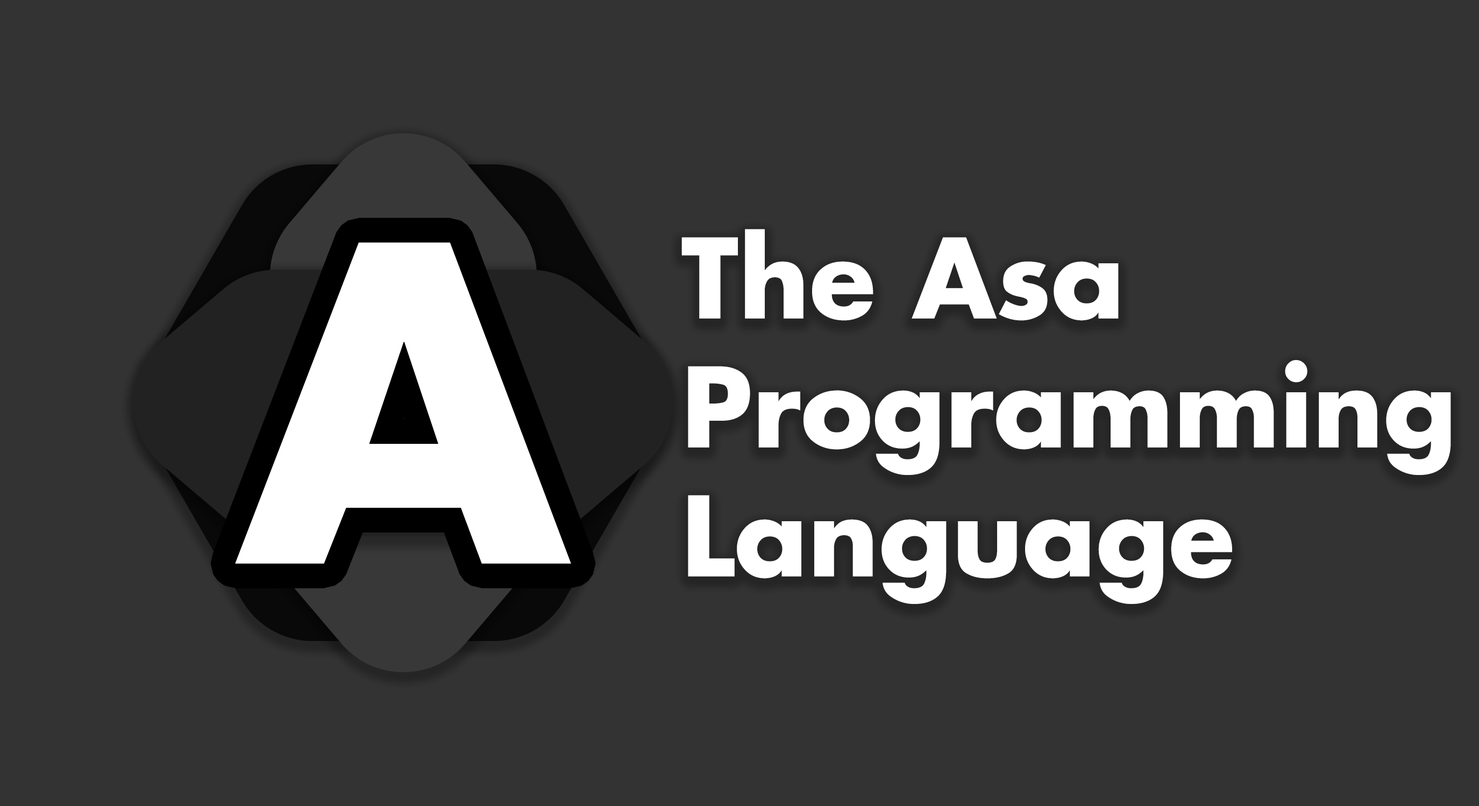
<style>
.page{position:relative;width:1479px;height:806px;background:#333333}
.page>*{position:absolute;margin:0}
.t1{font:107.5px "Futura-Bold";color:#ffffff}
.t2{font:425.6px "Futura-Bold";color:#ffffff}
</style>
<div class="page">
<p class="t1" style="left:681px;top:229px;width:770px;height:375px">The Asa<br>Programming<br>Language</p>
<p class="t2" style="left:235px;top:242px;width:336px;height:322px">A</p>
</div>
